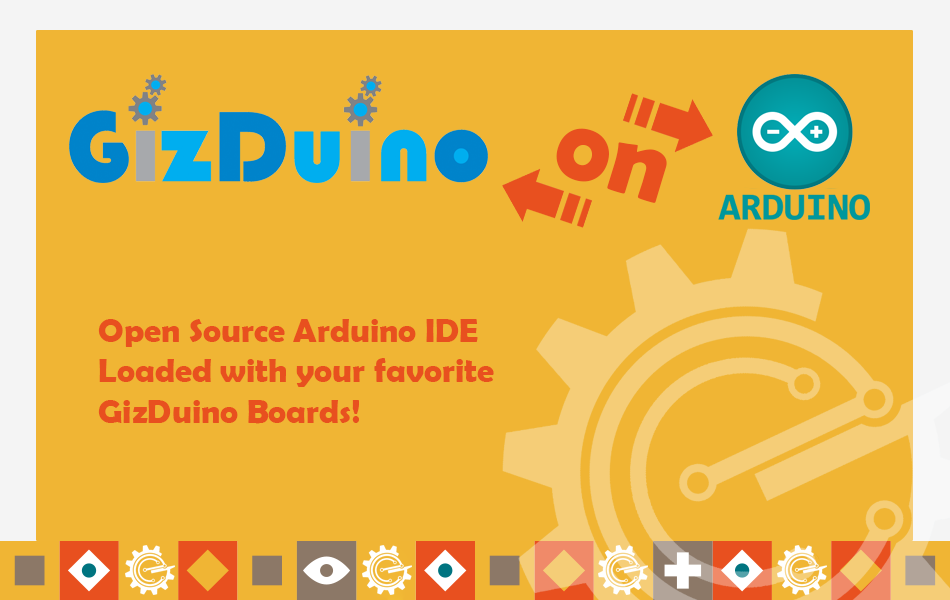
<style>
.page{position:relative;width:950px;height:600px;background:#f0b534}
.page>*{position:absolute;margin:0}
.t1{font:105.1px "BerlinSansFBDemi-Bold";color:#e8501f}
.t2{font:33.9px "BerlinSansFBDemi-Bold";color:#e8501f}
</style>
<div class="page">
<p class="t1" style="left:556px;top:128px;width:111px;height:75px;rotate:17deg">on</p>
<p class="t2" style="left:98px;top:319px;width:396px;height:105px">Open Source Arduino IDE<br>Loaded with your favorite<br>GizDuino Boards!</p>
</div>
